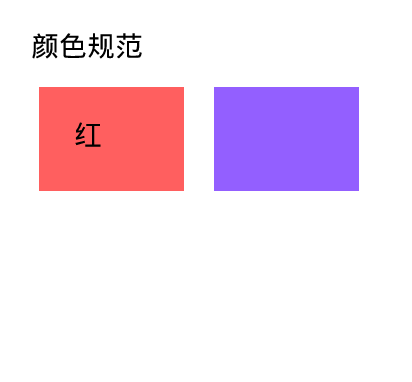
<style>
.page{position:relative;width:412px;height:382px;background:#ffffff}
.page>*{position:absolute;margin:0}
.t1{font:28px "HiraginoSansGB-W3";color:#000000}
</style>
<div class="page">
<p class="t1" style="left:32px;top:33px;width:110px;height:26px">颜色规范</p>
<p class="t1" style="left:75px;top:122px;width:26px;height:25px">红</p>
</div>
